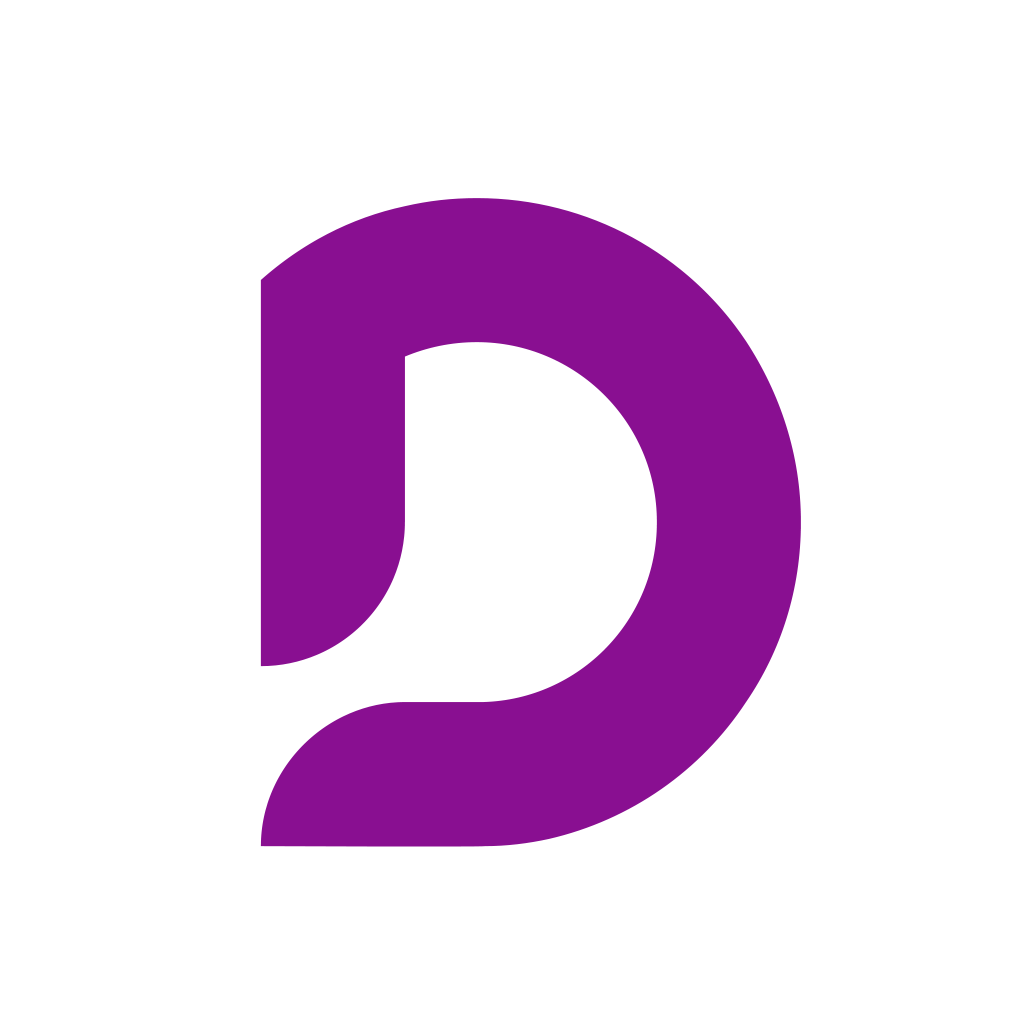
<style>
.page{position:relative;width:1024px;height:1024px;background:#ffffff}
.page>*{position:absolute;margin:0}
.t1{font:900px "MagmawaveCaps-Bold";color:#890f91}
</style>
<div class="page">
<p class="t1" style="left:260px;top:198px;width:541px;height:649px">D</p>
</div>
